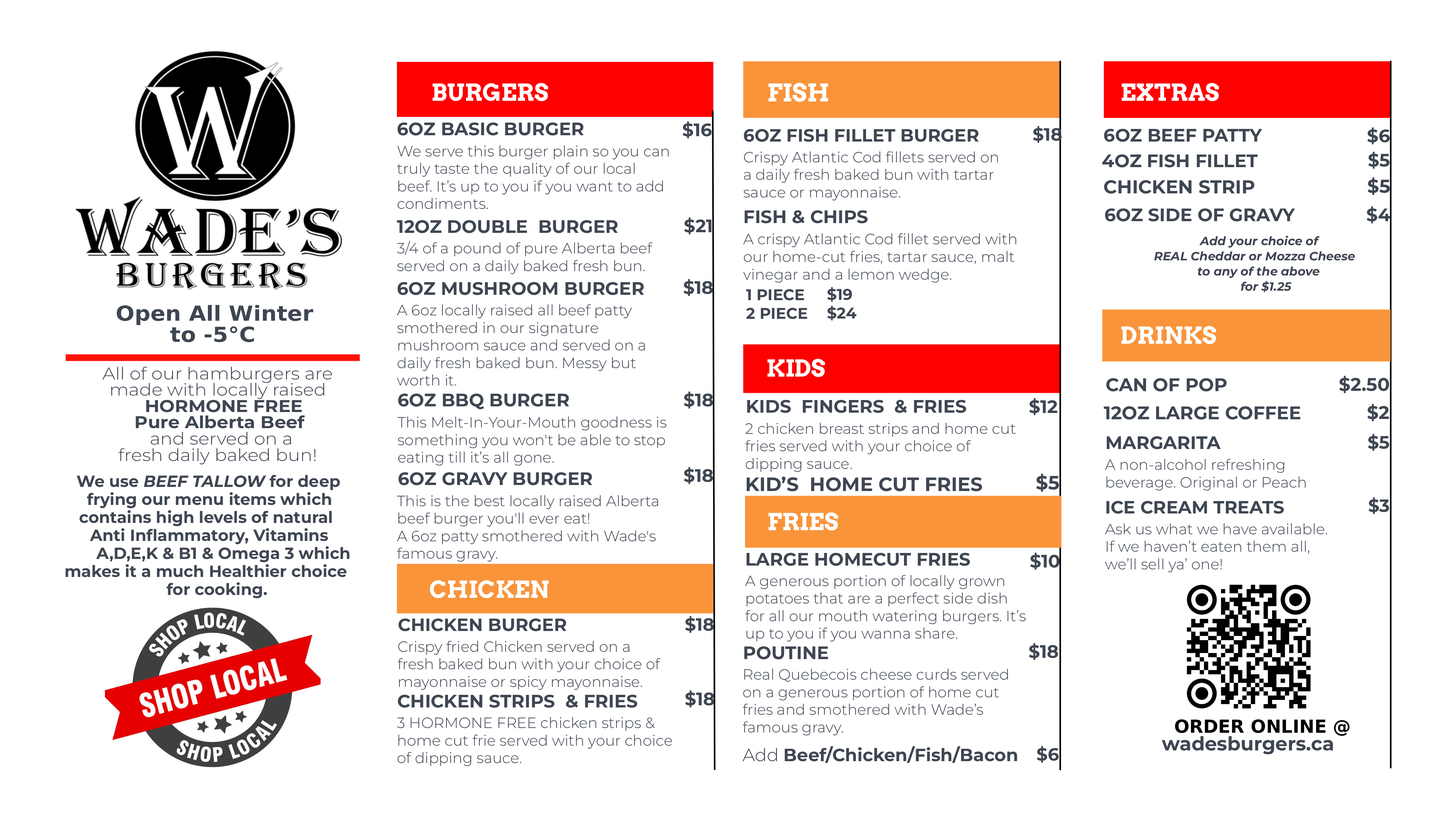
<style>
.page{position:relative;width:1456px;height:819px;background:#ffffff}
.page>*{position:absolute;margin:0}
.t1{font:23.4px "Arvo-Bold";color:#ffffff}
.t2{font:24.3px "Arvo-Bold";color:#ffffff}
.t3{font:18px "Montserrat-Bold";color:#3f4652}
.t4{font:17.7px "Montserrat-Bold";color:#3f4652}
.t5{font:14.9px/17.5px "Montserrat-Light";color:#3f4652}
.t6{font:18.6px "Montserrat-Bold";color:#3f4652}
.t7{font:14.9px/17.7px "Montserrat-Light";color:#3f4652}
.t8{font:12px/15.2px "Montserrat-BoldItalic";color:#3f4652}
.t9{font:12px/17.5px "Montserrat-BoldItalic";color:#3f4652}
.t10{font:15.5px/17.7px "Montserrat-Bold";color:#3f4652}
.t11{font:15.5px/18.6px "Montserrat-Bold";color:#3f4652}
.t12{font:20.7px "CanvaSans-Bold";color:#3f4652;scale:1.07 1}
.t13{font:17.1px/16.3px "Montserrat-Light";color:#3f4652;scale:1.07 1}
.t14{font:17.1px/13.3px "Montserrat-Light";color:#3f4652;scale:1.07 1}
.t15{font:17.1px/16.3px "Montserrat-Bold";color:#3f4652;scale:1.07 1}
.t16{font:18.3px "Montserrat-Bold";color:#3f4652}
.t17{font:14.9px/18px "Montserrat-Light";color:#3f4652}
.t18{font:19.3px "Montserrat-Bold";color:#3f4652}
.t19{font:16.1px/18px "Montserrat-Bold";color:#3f4652}
.t20{font:16.1px/18px "Montserrat-BoldItalic";color:#3f4652}
.t21{font:14.9px "Montserrat-Light";color:#3f4652}
.t22{font:14.9px/15.2px "Montserrat-Light";color:#3f4652}
.t23{font:18px "CanvaSans-Bold";color:#000000}
.t24{font:17.7px "Montserrat-Light";color:#3f4652}
</style>
<div class="page">
<p class="t1" style="left:433px;top:83px;width:115px;height:18px">BURGERS</p>
<p class="t2" style="left:768px;top:83px;width:60px;height:19px">FISH</p>
<p class="t1" style="left:1122px;top:83px;width:97px;height:18px">EXTRAS</p>
<p class="t3" style="left:397px;top:122px;width:187px;height:14px">6OZ BASIC BURGER</p>
<p class="t3" style="left:682px;top:121px;width:30px;height:17px">$16</p>
<p class="t4" style="left:744px;top:129px;width:235px;height:13px">6OZ FISH FILLET BURGER</p>
<p class="t4" style="left:1033px;top:126px;width:29px;height:17px">$18</p>
<p class="t3" style="left:1104px;top:129px;width:158px;height:13px">6OZ BEEF PATTY</p>
<p class="t3" style="left:1367px;top:127px;width:23px;height:17px">$6</p>
<p class="t5" style="left:397px;top:145px;width:272px;height:64px">We serve this burger plain so you can<br>truly taste the quality of our local<br>beef. It’s up to you if you want to add<br>condiments.</p>
<p class="t5" style="left:743px;top:151px;width:255px;height:50px">Crispy Atlantic Cod fillets served on<br>a daily fresh baked bun with tartar<br>sauce or mayonnaise.</p>
<p class="t3" style="left:1102px;top:154px;width:156px;height:13px">4OZ FISH FILLET</p>
<p class="t3" style="left:1368px;top:152px;width:22px;height:17px">$5</p>
<p class="t6" style="left:1104px;top:180px;width:150px;height:14px">CHICKEN STRIP</p>
<p class="t6" style="left:1368px;top:177px;width:22px;height:18px">$5</p>
<p class="t3" style="left:1105px;top:208px;width:190px;height:13px">6OZ SIDE OF GRAVY</p>
<p class="t3" style="left:1367px;top:206px;width:23px;height:17px">$4</p>
<p class="t3" style="left:397px;top:220px;width:221px;height:13px">12OZ DOUBLE  BURGER</p>
<p class="t3" style="left:684px;top:217px;width:28px;height:17px">$21</p>
<p class="t3" style="left:744px;top:210px;width:124px;height:13px">FISH &amp; CHIPS</p>
<p class="t7" style="left:743px;top:233px;width:273px;height:50px"><span class="t5">A crispy Atlantic Cod fillet served with</span><br>our home-cut fries, tartar sauce, malt<br>vinegar and a lemon wedge.</p>
<p class="t5" style="left:397px;top:241px;width:256px;height:33px">3/4 of a pound of pure Alberta beef<br>served on a daily baked fresh bun.</p>
<p class="t8" style="left:1154px;top:236px;width:201px;height:56px"><span class="t9">Add your choice of </span><br>REAL Cheddar or Mozza Cheese <br>to any of the above <br>for $1.25</p>
<p class="t3" style="left:397px;top:282px;width:247px;height:13px">6OZ MUSHROOM BURGER</p>
<p class="t3" style="left:683px;top:279px;width:30px;height:17px">$18</p>
<p class="t10" style="left:746px;top:289px;width:61px;height:30px">1 PIECE <span class="t11"><br>2 PIECE</span></p>
<p class="t10" style="left:827px;top:287px;width:30px;height:33px">$19<span class="t11"><br>$24</span></p>
<p class="t12" style="left:117px;top:305px;width:196px;height:20px">Open All Winter</p>
<p class="t5" style="left:397px;top:304px;width:248px;height:82px">A 6oz locally raised all beef patty<br>smothered in our signature<br>mushroom sauce and served on a<br>daily fresh baked bun. Messy but<br>worth it.</p>
<p class="t12" style="left:170px;top:326px;width:84px;height:16px">to -5°C</p>
<p class="t1" style="left:1121px;top:326px;width:95px;height:18px">DRINKS</p>
<p class="t1" style="left:767px;top:359px;width:58px;height:18px">KIDS</p>
<p class="t13" style="left:102px;top:367px;width:230px;height:97px;text-align:center"><span class="t14">All of our hamburgers are</span><br>made with locally raised<span class="t15"><br>HORMONE FREE<br>Pure Alberta Beef</span><br>and served on a<br>fresh daily baked bun!</p>
<p class="t16" style="left:1106px;top:378px;width:121px;height:13px">CAN OF POP</p>
<p class="t16" style="left:1339px;top:376px;width:50px;height:17px">$2.50</p>
<p class="t3" style="left:398px;top:393px;width:171px;height:16px">6OZ BBQ BURGER</p>
<p class="t3" style="left:684px;top:391px;width:29px;height:18px">$18</p>
<p class="t3" style="left:747px;top:400px;width:219px;height:13px">KIDS  FINGERS  &amp; FRIES</p>
<p class="t3" style="left:1029px;top:398px;width:29px;height:17px">$12</p>
<p class="t16" style="left:1104px;top:406px;width:197px;height:14px">12OZ LARGE COFFEE</p>
<p class="t16" style="left:1367px;top:404px;width:22px;height:17px">$2</p>
<p class="t5" style="left:397px;top:416px;width:269px;height:50px">This Melt-In-Your-Mouth goodness is<br>something you won't be able to stop<br>eating till it’s all gone.</p>
<p class="t5" style="left:745px;top:423px;width:271px;height:49px">2 chicken breast strips and home cut<br>fries served with your choice of<br>dipping sauce.</p>
<p class="t3" style="left:1107px;top:436px;width:114px;height:13px">MARGARITA</p>
<p class="t3" style="left:1368px;top:434px;width:21px;height:17px">$5</p>
<p class="t7" style="left:1105px;top:458px;width:201px;height:33px"><span class="t17">A non-alcohol refreshing</span><br>beverage. Original or Peach</p>
<p class="t3" style="left:398px;top:472px;width:194px;height:13px">6OZ GRAVY BURGER</p>
<p class="t3" style="left:684px;top:467px;width:29px;height:17px">$18</p>
<p class="t18" style="left:1036px;top:473px;width:23px;height:19px">$5</p>
<p class="t19" style="left:65px;top:475px;width:284px;height:123px">We use<span class="t20"> BEEF TALLOW</span> for deep<br>frying our menu items which<br>contains high levels of natural<br>Anti Inflammatory, Vitamins<br>A,D,E,K &amp; B1 &amp; Omega 3 which<br>makes it a much Healthier choice<br>for cooking.</p>
<p class="t18" style="left:747px;top:476px;width:235px;height:15px">KID’S  HOME CUT FRIES</p>
<p class="t5" style="left:397px;top:495px;width:261px;height:67px"><span class="t21">This is the best locally raised Alberta</span><br>beef burger you'll ever eat! <br>A 6oz patty smothered with Wade's<br>famous gravy.</p>
<p class="t4" style="left:1368px;top:497px;width:21px;height:17px">$3</p>
<p class="t4" style="left:1106px;top:501px;width:178px;height:13px">ICE CREAM TREATS</p>
<p class="t1" style="left:768px;top:512px;width:70px;height:19px">FRIES</p>
<p class="t5" style="left:1105px;top:523px;width:222px;height:50px"><span class="t22">Ask us what we have available. </span><br>If we haven’t eaten them all,<br>we’ll sell ya’ one!</p>
<p class="t3" style="left:746px;top:553px;width:224px;height:13px">LARGE HOMECUT FRIES</p>
<p class="t3" style="left:1030px;top:553px;width:30px;height:17px">$10</p>
<p class="t1" style="left:430px;top:580px;width:119px;height:18px">CHICKEN</p>
<p class="t5" style="left:745px;top:575px;width:281px;height:67px">A generous portion of locally grown<br>potatoes that are a perfect side dish<br>for all our mouth watering burgers. It’s<br>up to you if you wanna share.</p>
<p class="t4" style="left:685px;top:616px;width:29px;height:17px">$18</p>
<p class="t4" style="left:398px;top:618px;width:169px;height:13px">CHICKEN BURGER</p>
<p class="t5" style="left:397px;top:640px;width:264px;height:50px">Crispy fried Chicken served on a<br>fresh baked bun with your choice of<br>mayonnaise or spicy mayonnaise.</p>
<p class="t3" style="left:744px;top:646px;width:84px;height:13px">POUTINE</p>
<p class="t3" style="left:1029px;top:643px;width:29px;height:17px">$18</p>
<p class="t5" style="left:743px;top:669px;width:265px;height:67px">Real Quebecois cheese curds served<br>on a generous portion of home cut<br>fries and smothered with Wade’s<br>famous gravy.</p>
<p class="t3" style="left:398px;top:694px;width:239px;height:14px">CHICKEN STRIPS  &amp; FRIES</p>
<p class="t3" style="left:685px;top:690px;width:29px;height:17px">$18</p>
<p class="t5" style="left:397px;top:717px;width:275px;height:49px">3 HORMONE FREE chicken strips &amp; <br>home cut frie served with your choice <br>of dipping sauce.</p>
<p class="t23" style="left:1175px;top:719px;width:174px;height:17px">ORDER ONLINE @</p>
<p class="t18" style="left:1162px;top:736px;width:171px;height:19px">wadesburgers.ca</p>
<p class="t4" style="left:743px;top:746px;width:274px;height:17px"><span class="t24">Add </span>Beef/Chicken/Fish/Bacon</p>
<p class="t4" style="left:1037px;top:746px;width:22px;height:17px">$6</p>
</div>
